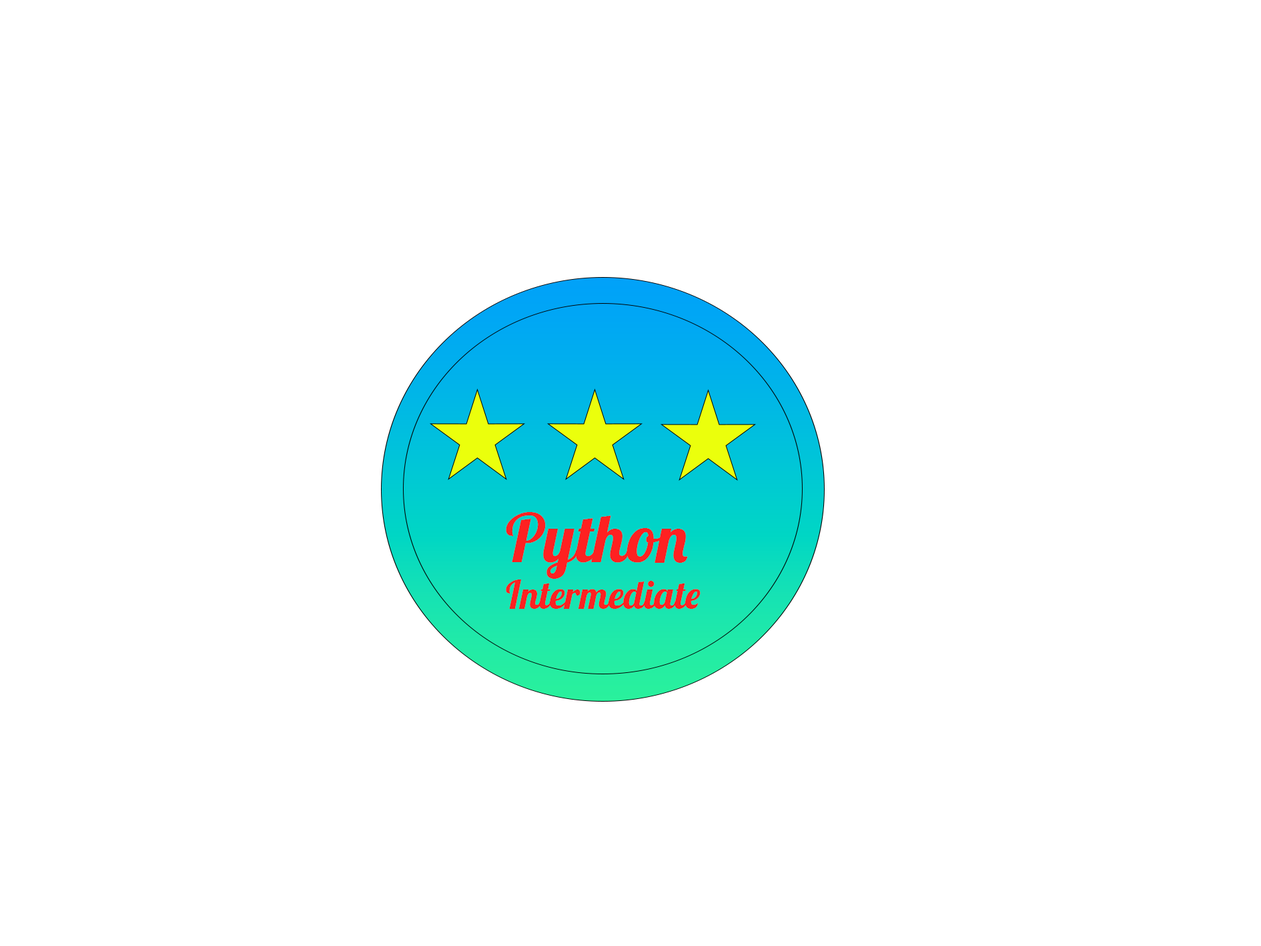
<style>
.page{position:relative;width:1261px;height:946px;background:#ffffff}
.page>*{position:absolute;margin:0}
.t1{font:38.9px "Lobster-Regular";color:#ff2121}
.t2{font:66.7px "Lobster-Regular";color:#ff2121}
</style>
<div class="page">
<p class="t1" style="left:506px;top:512px;width:195px;height:97px"><span class="t2">Python <br></span>Intermediate</p>
</div>
